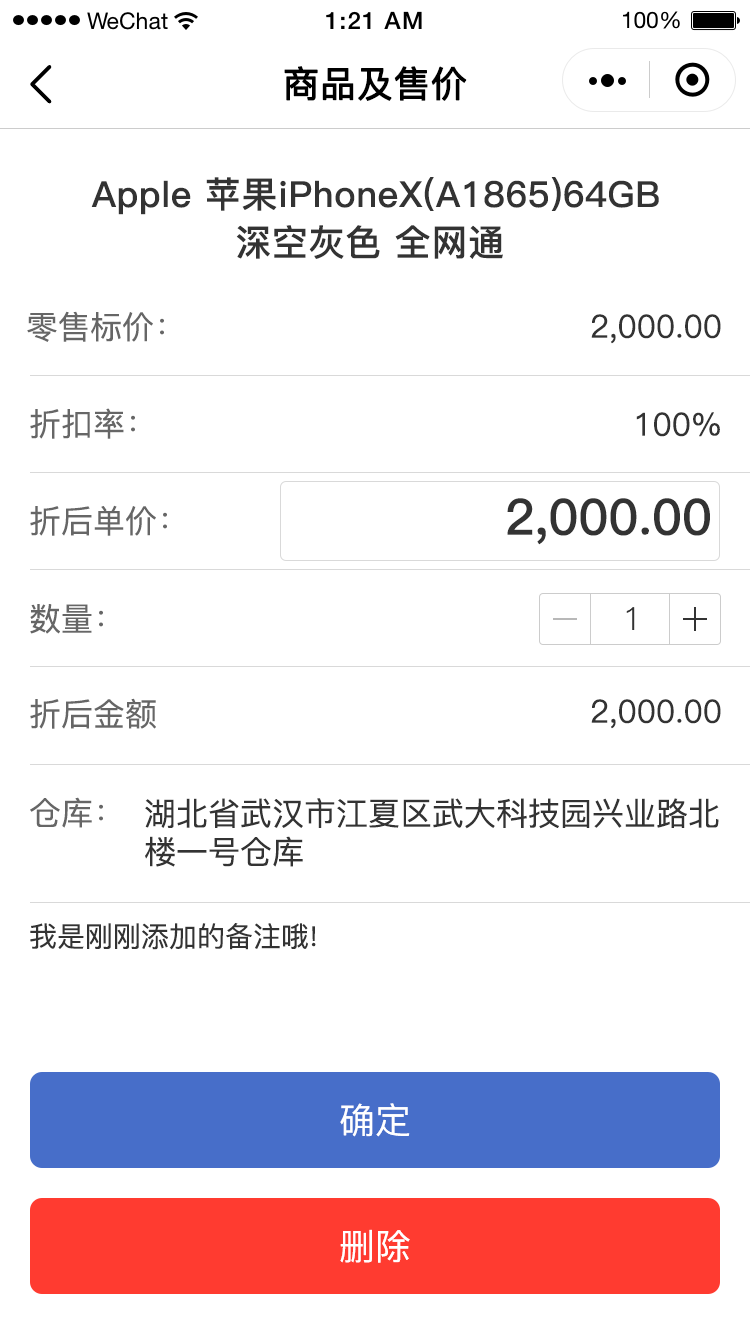
<style>
.page{position:relative;width:750px;height:1334px;background:#ffffff}
.page>*{position:absolute;margin:0}
.t1{font:36px "PingFang-SC-Medium";color:#000000;font-weight:bold}
.t2{font:36px/48px "PingFang-SC-Bold";letter-spacing:0.02em;color:#333333}
.t3{font:32px "PingFang-SC-Medium";color:#666666}
.t4{font:32px "PingFang-SC-Medium";color:#333333}
.t5{font:50px "PingFang-SC-Bold";color:#333333}
.t6{font:32px "PingFang-SC-Regular";color:#333333}
.t7{font:28px "PingFang-SC-Medium";color:#333333}
.t8{font:36px "PingFang-SC-Medium";color:#ffffff}
</style>
<div class="page">
<p class="t1" style="left:284px;top:66px;width:183px;height:35px">商品及售价</p>
<p class="t2" style="left:91px;top:177px;width:568px;height:82px;text-align:center">Apple 苹果iPhoneX(A1865)64GB<br>深空灰色 全网通</p>
<p class="t3" style="left:27px;top:311px;width:137px;height:31px">零售标价：</p>
<p class="t4" style="left:591px;top:314px;width:130px;height:30px">2,000.00</p>
<p class="t3" style="left:30px;top:408px;width:105px;height:31px">折扣率：</p>
<p class="t4" style="left:636px;top:412px;width:84px;height:25px">100%</p>
<p class="t3" style="left:30px;top:505px;width:137px;height:31px">折后单价：</p>
<p class="t5" style="left:507px;top:498px;width:203px;height:47px">2,000.00</p>
<p class="t3" style="left:30px;top:604px;width:73px;height:30px">数量：</p>
<p class="t6" style="left:626px;top:607px;width:9px;height:23px">1</p>
<p class="t3" style="left:30px;top:698px;width:126px;height:31px">折后金额</p>
<p class="t4" style="left:591px;top:699px;width:130px;height:30px">2,000.00</p>
<p class="t3" style="left:30px;top:797px;width:73px;height:31px">仓库：</p>
<p class="t4" style="left:145px;top:798px;width:574px;height:69px">湖北省武汉市江夏区武大科技园兴业路北<br>楼一号仓库</p>
<p class="t7" style="left:30px;top:923px;width:286px;height:27px">我是刚刚添加的备注哦!</p>
<p class="t8" style="left:340px;top:1103px;width:70px;height:34px">确定</p>
<p class="t8" style="left:340px;top:1229px;width:70px;height:34px">删除</p>
</div>
